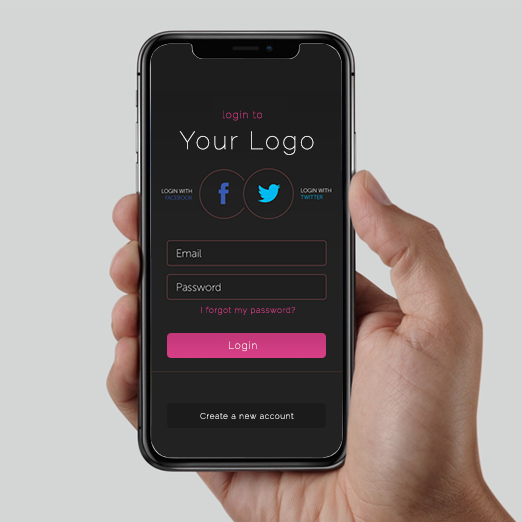
<style>
.page{position:relative;width:522px;height:522px;background:#d4d6d5}
.page>*{position:absolute;margin:0}
.t1{font:10px "Raleway-Thin";letter-spacing:0.1em}
.t2{font:25px "Raleway-Thin";letter-spacing:0.1em;color:#ffffff}
.t3{font:8px "Raleway-Thin";letter-spacing:0.1em}
.t4{font:10px "Raleway-Thin";letter-spacing:0.1em;color:#ffffff}
.t5{font:8px "Raleway-Thin";letter-spacing:0.1em;color:#ffffff}
</style>
<div class="page">
<p class="t1" style="left:223px;top:110px;width:39px;height:11px">login to</p>
<p class="t2" style="left:179px;top:131px;width:135px;height:24px">Your Logo</p>
<p class="t3" style="left:201px;top:306px;width:94px;height:9px">I forgot my password?</p>
<p class="t4" style="left:229px;top:341px;width:28px;height:11px">Login</p>
<p class="t5" style="left:200px;top:413px;width:94px;height:6px">Create a new account</p>
</div>
